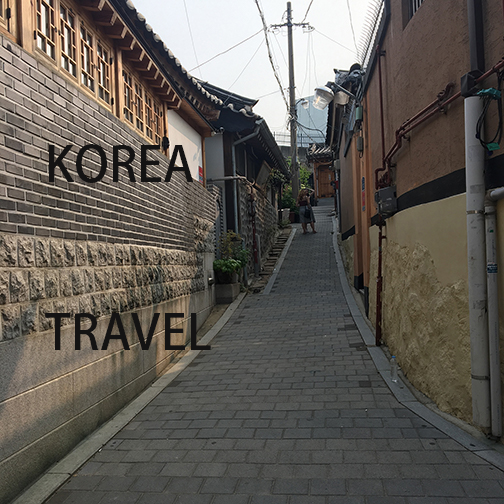
<style>
.page{position:relative;width:504px;height:504px}
.page>*{position:absolute;margin:0}
.t1{font:48px "AdobeFanHeitiStd-Bold";color:#141313}
</style>
<div class="page">
<p class="t1" style="left:45px;top:144px;width:166px;height:206px">KOREA<br><br>TRAVEL</p>
</div>
